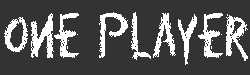
<style>
.page{position:relative;width:250px;height:75px;background:#333333}
.page>*{position:absolute;margin:0}
.t1{font:56.7px "Eraser-Regular";color:#ffffff;scale:0.71 1}
</style>
<div class="page">
<p class="t1" style="left:4px;top:12px;width:244px;height:53px">one player</p>
</div>
